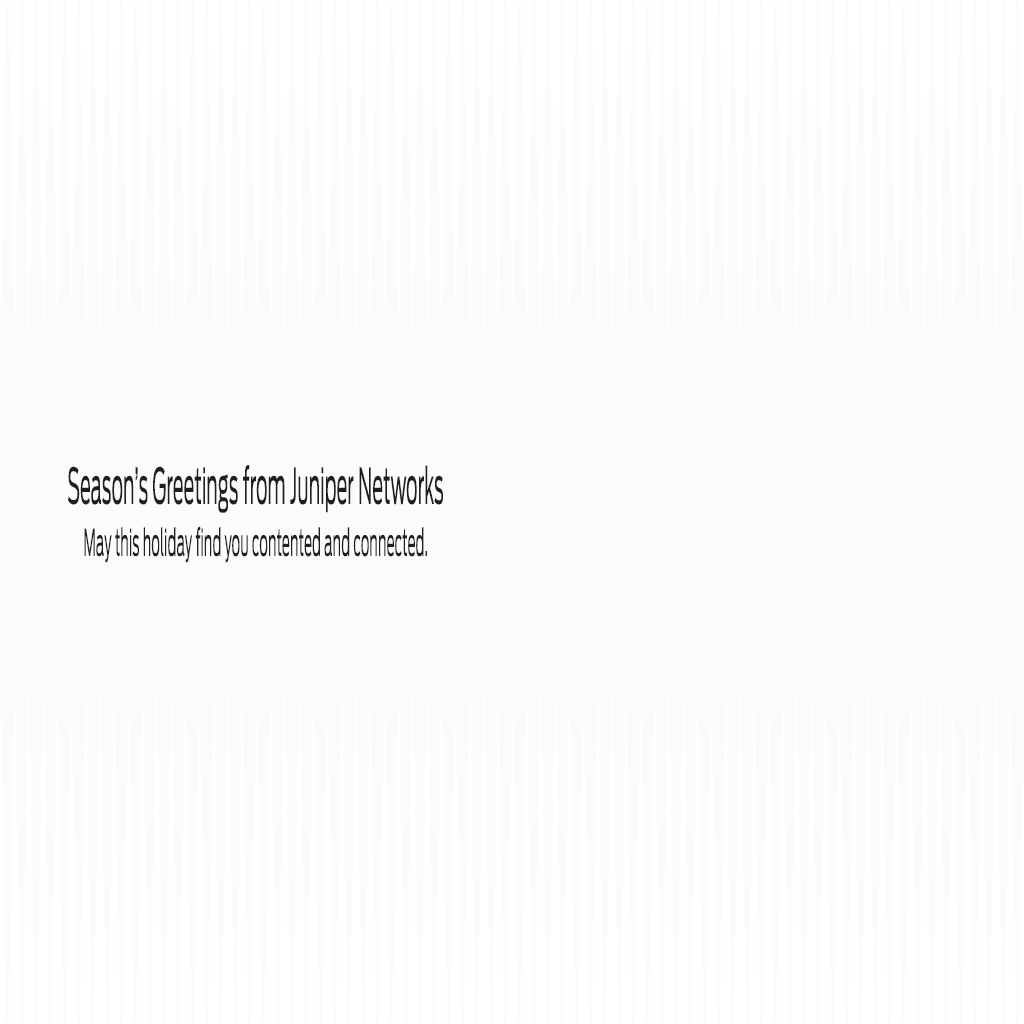
<style>
.page{position:relative;width:1024px;height:1024px;background:#fbfbfb}
.page>*{position:absolute;margin:0}
.t1{font:49.5px "Antenna-Regular";color:#1f1f1f;scale:0.37 1}
.t2{font:37.1px "Antenna-Regular";color:#1f1f1f;scale:0.37 1}
</style>
<div class="page">
<p class="t1" style="left:68px;top:465px;width:375px;height:48px">Season’s Greetings from Juniper Networks</p>
<p class="t2" style="left:84px;top:526px;width:343px;height:37px">May this holiday find you contented and connected.</p>
</div>
